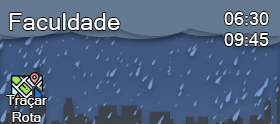
<style>
.page{position:relative;width:280px;height:124px;background:#647a92}
.page>*{position:absolute;margin:0}
.t1{font:24px "MicrosoftSansSerif";color:#ffffff}
.t2{font:18px "MicrosoftSansSerif";color:#ffffff}
.t3{font:14px "MicrosoftSansSerif";color:#ffffff}
</style>
<div class="page">
<p class="t1" style="left:9px;top:13px;width:111px;height:17px">Faculdade</p>
<p class="t2" style="left:224px;top:12px;width:45px;height:34px">06:30<br>09:45</p>
<p class="t3" style="left:6px;top:95px;width:41px;height:27px;text-align:center">Traçar<br>Rota</p>
</div>
